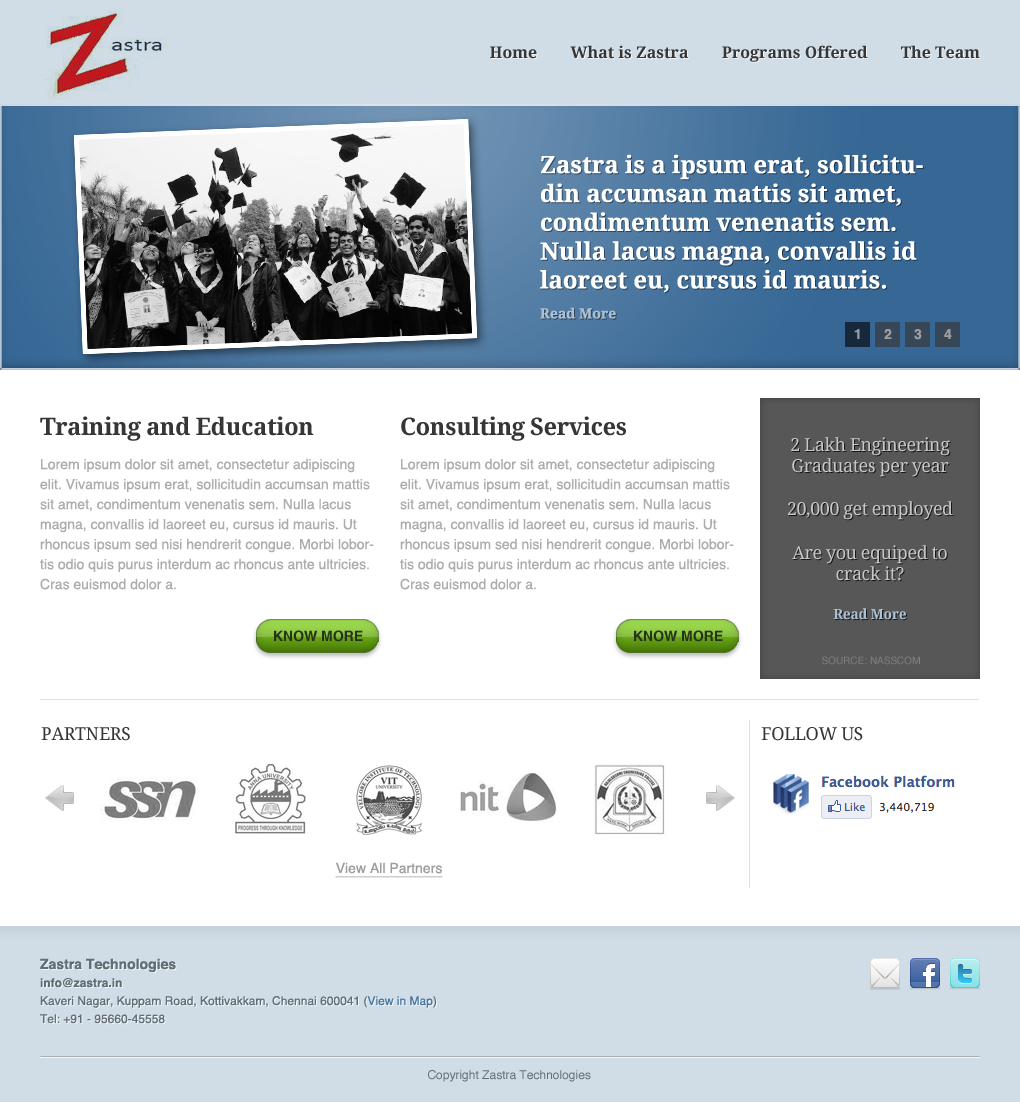
<style>
.page{position:relative;width:1020px;height:1102px;background:#ffffff}
.page>*{position:absolute;margin:0}
.t1{font:16px "DroidSerif-Bold";color:#363636}
.t2{font:24px "DroidSerif-Bold";color:#ffffff}
.t3{font:14px/30px "DroidSerif-Bold";color:#aec1d3}
.t4{font:14px "Helvetica-Bold";color:#9d9d9d}
.t5{font:24px "DroidSerif-Bold";letter-spacing:-0.025em;color:#363636}
.t6{font:18px "DroidSerif";letter-spacing:-0.025em;color:#c7c7c7}
.t7{font:14px "DroidSerif-Bold";letter-spacing:-0.025em;color:#aec1d3}
.t8{font:14px/20px "Helvetica";color:#adadad}
.t9{font:14.1px "Helvetica-Bold";color:#273318;text-transform:uppercase}
.t10{font:10px "Helvetica";color:#7f7f7f;text-transform:uppercase}
.t11{font:18px "DroidSerif";letter-spacing:-0.025em;color:#363636;text-transform:uppercase}
.t12{font:14px "Helvetica";color:#9d9d9d;text-decoration:underline}
.t13{font:12px/18px "Helvetica";color:#626e76}
.t14{font:14px/18px "Helvetica-Bold";color:#626e76}
.t15{font:12px/18px "Helvetica-Bold";color:#626e76}
.t16{font:12px "Helvetica";color:#626e76}
</style>
<div class="page">
<p class="t1" style="left:490px;top:45px;width:490px;height:17px">Home        What is Zastra        Programs Offered        The Team</p>
<p class="t2" style="left:540px;top:154px;width:383px;height:165px">Zastra is a ipsum erat, sollicitudin accumsan mattis sit amet, condimentum venenatis sem. Nulla lacus magna, convallis id laoreet eu, cursus id mauris.<br><span class="t3">Read More</span></p>
<p class="t4" style="left:854px;top:329px;width:6px;height:10px">1</p>
<p class="t4" style="left:884px;top:329px;width:8px;height:10px">2</p>
<p class="t4" style="left:914px;top:329px;width:8px;height:11px">3</p>
<p class="t4" style="left:944px;top:329px;width:8px;height:10px">4</p>
<p class="t5" style="left:40px;top:416px;width:274px;height:25px">Training and Education</p>
<p class="t5" style="left:401px;top:416px;width:225px;height:25px">Consulting Services</p>
<p class="t6" style="left:788px;top:437px;width:165px;height:183px;text-align:center">2 Lakh Engineering Graduates per year<br><br>20,000 get employed<br><br>Are you equiped to crack it?<br><br><span class="t7">Read More</span></p>
<p class="t8" style="left:40px;top:458px;width:334px;height:132px">Lorem ipsum dolor sit amet, consectetur adipiscing elit. Vivamus ipsum erat, sollicitudin accumsan mattis sit amet, condimentum venenatis sem. Nulla lacus magna, convallis id laoreet eu, cursus id mauris. Ut rhoncus ipsum sed nisi hendrerit congue. Morbi lobortis odio quis purus interdum ac rhoncus ante ultricies. Cras euismod dolor a.</p>
<p class="t8" style="left:400px;top:458px;width:334px;height:132px">Lorem ipsum dolor sit amet, consectetur adipiscing elit. Vivamus ipsum erat, sollicitudin accumsan mattis sit amet, condimentum venenatis sem. Nulla lacus magna, convallis id laoreet eu, cursus id mauris. Ut rhoncus ipsum sed nisi hendrerit congue. Morbi lobortis odio quis purus interdum ac rhoncus ante ultricies. Cras euismod dolor a.</p>
<p class="t9" style="left:274px;top:630px;width:89px;height:12px">Know More</p>
<p class="t9" style="left:634px;top:630px;width:89px;height:12px">Know More</p>
<p class="t10" style="left:822px;top:656px;width:98px;height:9px">Source: Nasscom</p>
<p class="t11" style="left:41px;top:727px;width:89px;height:14px">Partners</p>
<p class="t11" style="left:761px;top:727px;width:102px;height:14px">Follow Us</p>
<p class="t12" style="left:335px;top:862px;width:108px;height:16px">View All Partners</p>
<p class="t13" style="left:40px;top:958px;width:397px;height:66px"><span class="t14">Zastra Technologies<br></span><span class="t15">info@zastra.in<br></span>Kaveri Nagar, Kuppam Road, Kottivakkam, Chennai 600041 (View in Map)<br>Tel: +91 - 95660-45558</p>
<p class="t16" style="left:428px;top:1070px;width:163px;height:12px">Copyright Zastra Technologies</p>
</div>
